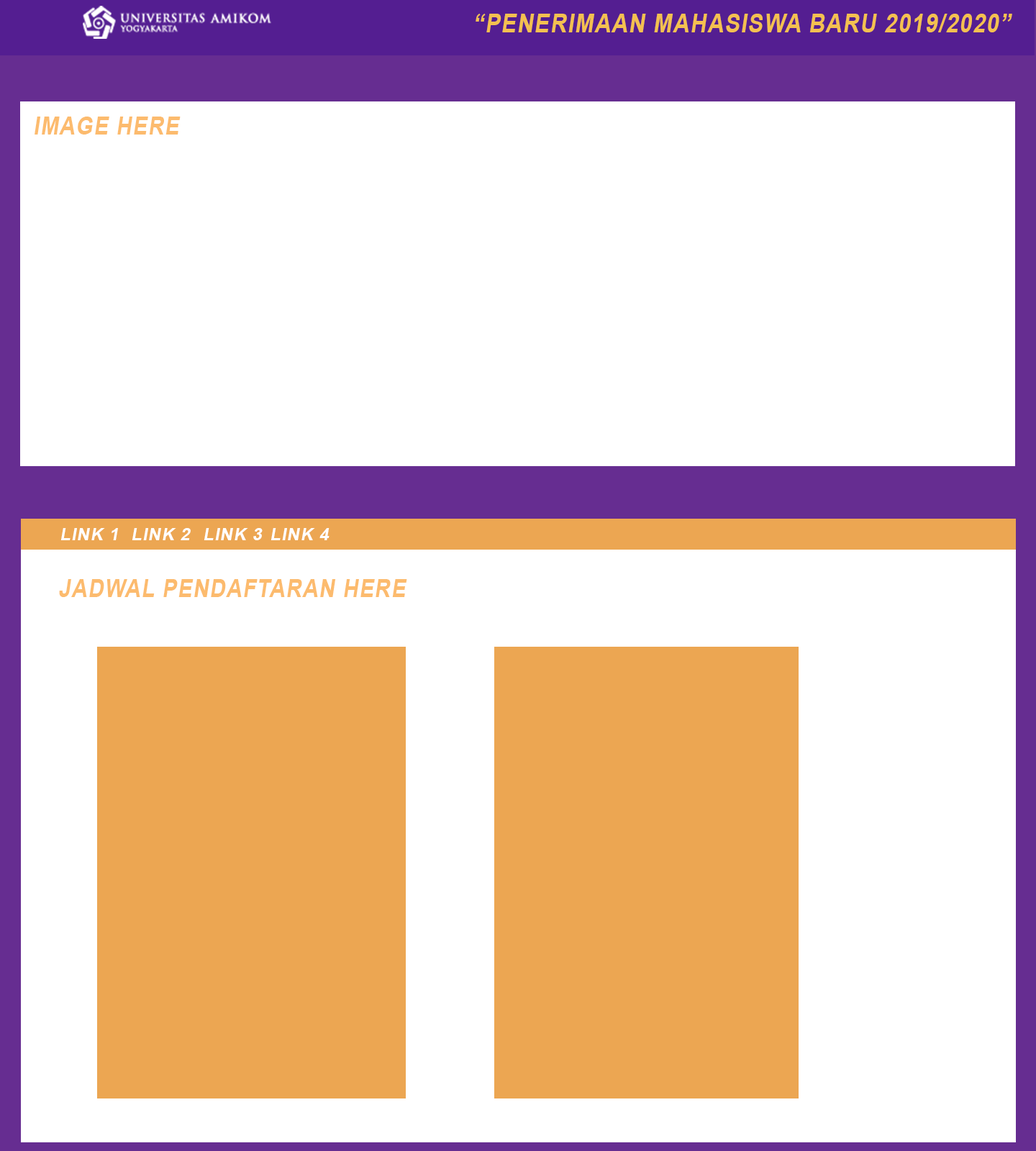
<style>
.page{position:relative;width:1036px;height:1151px;background:#ffffff}
.page>*{position:absolute;margin:0}
.t1{font:25.9px "Arial-BoldMT";letter-spacing:0.05em;color:#f4c050;font-style:italic;scale:0.86 1}
.t2{font:25.1px "Arial-BoldMT";letter-spacing:0.05em;color:#fcbb6e;font-style:italic;scale:0.86 1}
.t3{font:17.3px "Arial-BoldMT";letter-spacing:0.05em;color:#ffffff;font-style:italic}
</style>
<div class="page">
<p class="t1" style="left:476px;top:14px;width:536px;height:18px">“PENERIMAAN MAHASISWA BARU 2019/2020”</p>
<p class="t2" style="left:35px;top:117px;width:146px;height:18px">IMAGE HERE</p>
<p class="t3" style="left:60px;top:528px;width:58px;height:12px">LINK 1</p>
<p class="t3" style="left:132px;top:528px;width:59px;height:12px">LINK 2</p>
<p class="t3" style="left:204px;top:528px;width:59px;height:12px">LINK 3</p>
<p class="t3" style="left:270px;top:528px;width:59px;height:12px">LINK 4</p>
<p class="t2" style="left:59px;top:579px;width:348px;height:18px">JADWAL PENDAFTARAN HERE</p>
</div>
